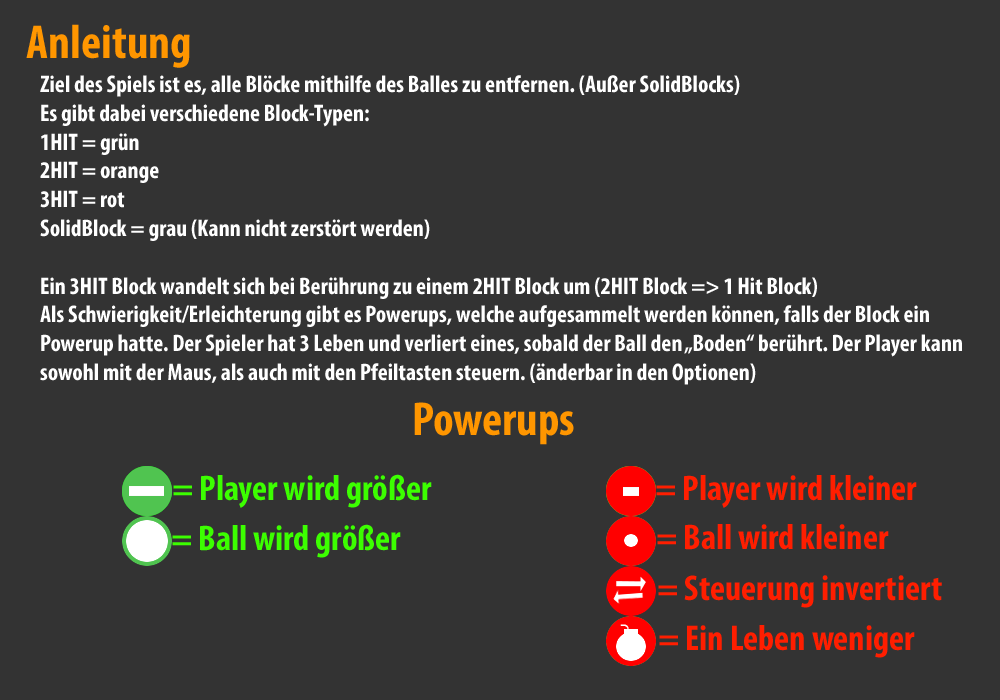
<style>
.page{position:relative;width:1000px;height:700px;background:#333333}
.page>*{position:absolute;margin:0}
.t1{font:48px "MyriadPro-BoldCond";color:#ff9600}
.t2{font:24px "MyriadPro-BoldCond";color:#ffffff}
.t3{font:36px "MyriadPro-BoldCond";color:#3cff00}
.t4{font:36px "MyriadPro-BoldCond";color:#ff1e00}
</style>
<div class="page">
<p class="t1" style="left:26px;top:24px;width:164px;height:44px">Anleitung</p>
<p class="t2" style="left:40px;top:75px;width:922px;height:310px">Ziel des Spiels ist es, alle Blöcke mithilfe des Balles zu entfernen. (Außer SolidBlocks)<br>Es gibt dabei verschiedene Block-Typen:<br>1HIT = grün<br>2HIT = orange<br>3HIT = rot<br>SolidBlock = grau (Kann nicht zerstört werden)<br><br>Ein 3HIT Block wandelt sich bei Berührung zu einem 2HIT Block um (2HIT Block =&gt; 1 Hit Block)<br>Als Schwierigkeit/Erleichterung gibt es Powerups, welche aufgesammelt werden können, falls der Block ein<br>Powerup hatte. Der Spieler hat 3 Leben und verliert eines, sobald der Ball den „Boden“ berührt. Der Player kann<br>sowohl mit der Maus, als auch mit den Pfeiltasten steuern. (änderbar in den Optionen)</p>
<p class="t1" style="left:414px;top:402px;width:160px;height:43px">Powerups</p>
<p class="t3" style="left:173px;top:474px;width:259px;height:34px">= Player wird größer</p>
<p class="t4" style="left:656px;top:475px;width:261px;height:33px">= Player wird kleiner</p>
<p class="t3" style="left:172px;top:524px;width:229px;height:34px">= Ball wird größer</p>
<p class="t4" style="left:657px;top:524px;width:232px;height:26px">= Ball wird kleiner</p>
<p class="t4" style="left:658px;top:575px;width:284px;height:33px">= Steuerung invertiert</p>
<p class="t4" style="left:659px;top:625px;width:256px;height:33px">= Ein Leben weniger</p>
</div>
